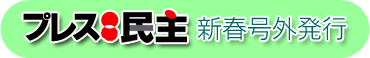
<style>
.page{position:relative;width:370px;height:58px;background:#99ff99}
.page>*{position:absolute;margin:0}
.t1{font:30px "HGSKasaneKakugothicH";letter-spacing:-0.24em;color:#000000}
.t2{font:30px "HGSKasaneKakugothicH";letter-spacing:-0.075em;color:#000000}
.t3{font:25px "NfMotoyaCedar-W1-90mskp-RKSJ-H";color:#006666}
</style>
<div class="page">
<p class="t1" style="left:23px;top:12px;width:77px;height:30px"><span class="t2">プ</span>レス</p>
<p class="t3" style="left:198px;top:17px;width:148px;height:23px">新春号外発行</p>
</div>
